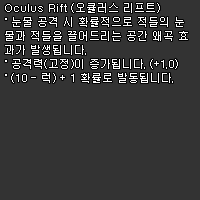
<style>
.page{position:relative;width:200px;height:200px;background:#333333}
.page>*{position:absolute;margin:0}
.t1{font:11px/14px "Dotum";color:#ffffff}
</style>
<div class="page">
<p class="t1" style="left:5px;top:3px;width:183px;height:80px">Oculus Rift (오큘러스 리프트)<br>˚ 눈물 공격 시 확률적으로 적들의 눈<br>물과 적들을 끌어드리는 공간 왜곡 효<br>과가 발생됩니다.<br>˚ 공격력(고정)이 증가됩니다. (+1.0)<br>˚ (10 - 럭) + 1 확률로 발동됩니다.</p>
</div>
